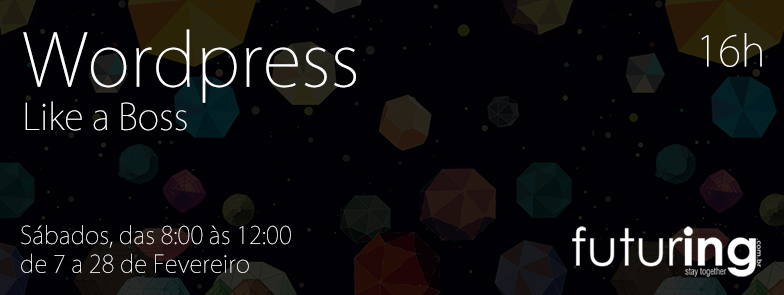
<style>
.page{position:relative;width:784px;height:295px;background:#010105}
.page>*{position:absolute;margin:0}
.t1{font:36px "KozGoPro-ExtraLight";color:#ffffff}
.t2{font:72px "KozGoPro-ExtraLight";color:#ffffff}
.t3{font:42px "KozGoPro-ExtraLight";color:#ffffff}
.t4{font:24px "KozGoPro-ExtraLight";color:#ffffff}
</style>
<div class="page">
<p class="t1" style="left:23px;top:29px;width:333px;height:102px"><span class="t2">Wordpress<br></span>Like a Boss</p>
<p class="t3" style="left:701px;top:33px;width:61px;height:34px">16h</p>
<p class="t4" style="left:21px;top:225px;width:270px;height:48px">Sábados, das 8:00 às 12:00<br>de 7 a 28 de Fevereiro</p>
</div>
